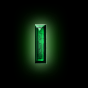
<style>
.page{position:relative;width:88px;height:88px;background:#000000}
.page>*{position:absolute;margin:0}
.t1{font:54.9px "InfiniumGuardian";font-weight:bold}
</style>
<div class="page">
<p class="t1" style="left:35px;top:24px;width:12px;height:40px">I</p>
<p class="t1" style="left:35px;top:24px;width:12px;height:40px">I</p>
</div>
